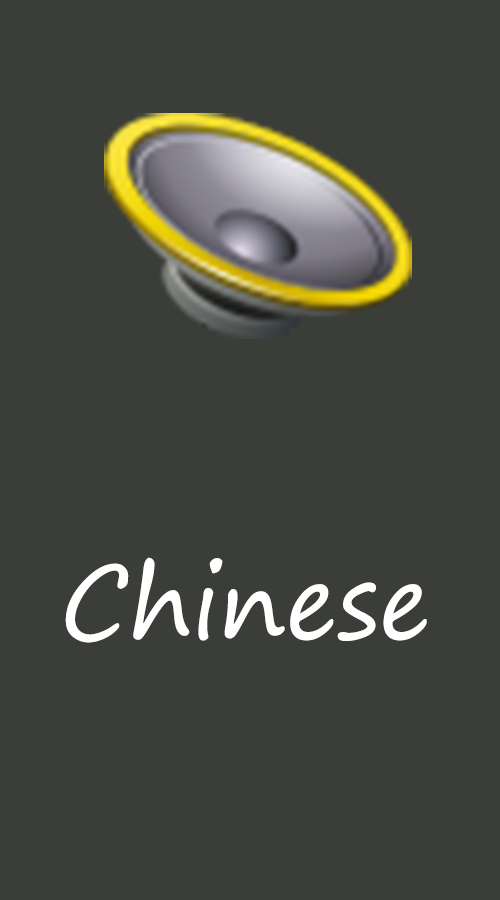
<style>
.page{position:relative;width:500px;height:900px;background:#3b3d38}
.page>*{position:absolute;margin:0}
.t1{font:98.9px "SegoePrint";color:#ffffff}
</style>
<div class="page">
<p class="t1" style="left:65px;top:557px;width:362px;height:86px">Chinese</p>
</div>
